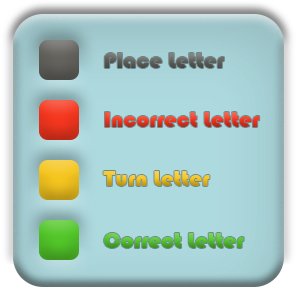
<style>
.page{position:relative;width:300px;height:300px}
.page>*{position:absolute;margin:0}
.t1{font:23px "Bauhaus93";color:#63625d}
.t2{font:23px "Bauhaus93"}
</style>
<div class="page">
<p class="t1" style="left:104px;top:53px;width:120px;height:15px">Place Letter</p>
<p class="t2" style="left:105px;top:112px;width:155px;height:15px">Incorrect Letter</p>
<p class="t2" style="left:103px;top:171px;width:107px;height:15px">Turn Letter</p>
<p class="t2" style="left:104px;top:233px;width:140px;height:15px">Correct Letter</p>
</div>
